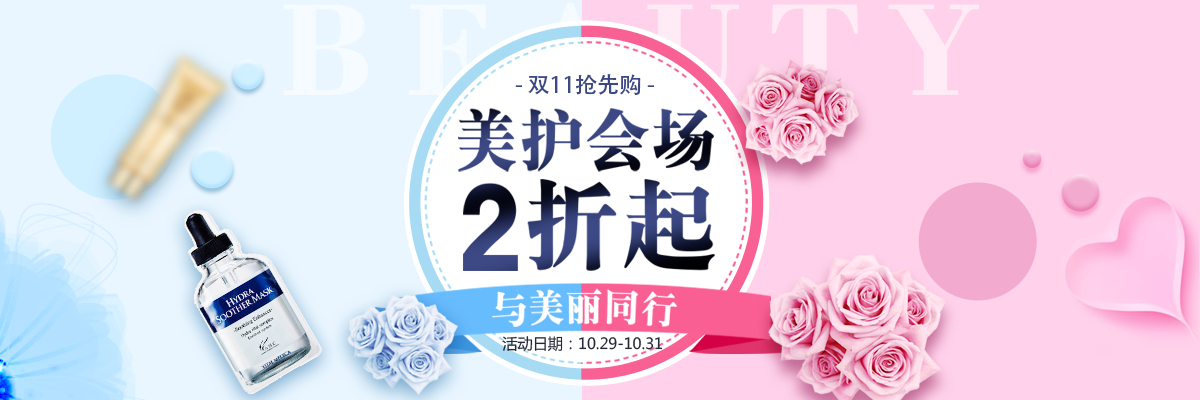
<style>
.page{position:relative;width:1200px;height:400px;background:#ffd1ea}
.page>*{position:absolute;margin:0}
.t1{font:22.3px "AdobeHeitiStd-Regular";color:#3d4984}
.t2{font:67px "HYa9gj"}
.t3{font:126.4px "HYb2gj"}
.t4{font:99.4px "HYa9gj"}
.t5{font:37.5px "HYa9gj";color:#ffffff}
.t6{font:15.1px "MicrosoftYaHei";color:#2e2e2e}
</style>
<div class="page">
<p class="t1" style="left:515px;top:74px;width:139px;height:21px">- 双11抢先购 -</p>
<p class="t2" style="left:458px;top:108px;width:256px;height:64px">美护会场</p>
<p class="t3" style="left:463px;top:183px;width:55px;height:88px">2</p>
<p class="t4" style="left:527px;top:179px;width:188px;height:92px">折起</p>
<p class="t5" style="left:491px;top:288px;width:186px;height:39px">与美丽同行</p>
<p class="t6" style="left:502px;top:336px;width:161px;height:16px">活动日期：10.29-10.31</p>
</div>
